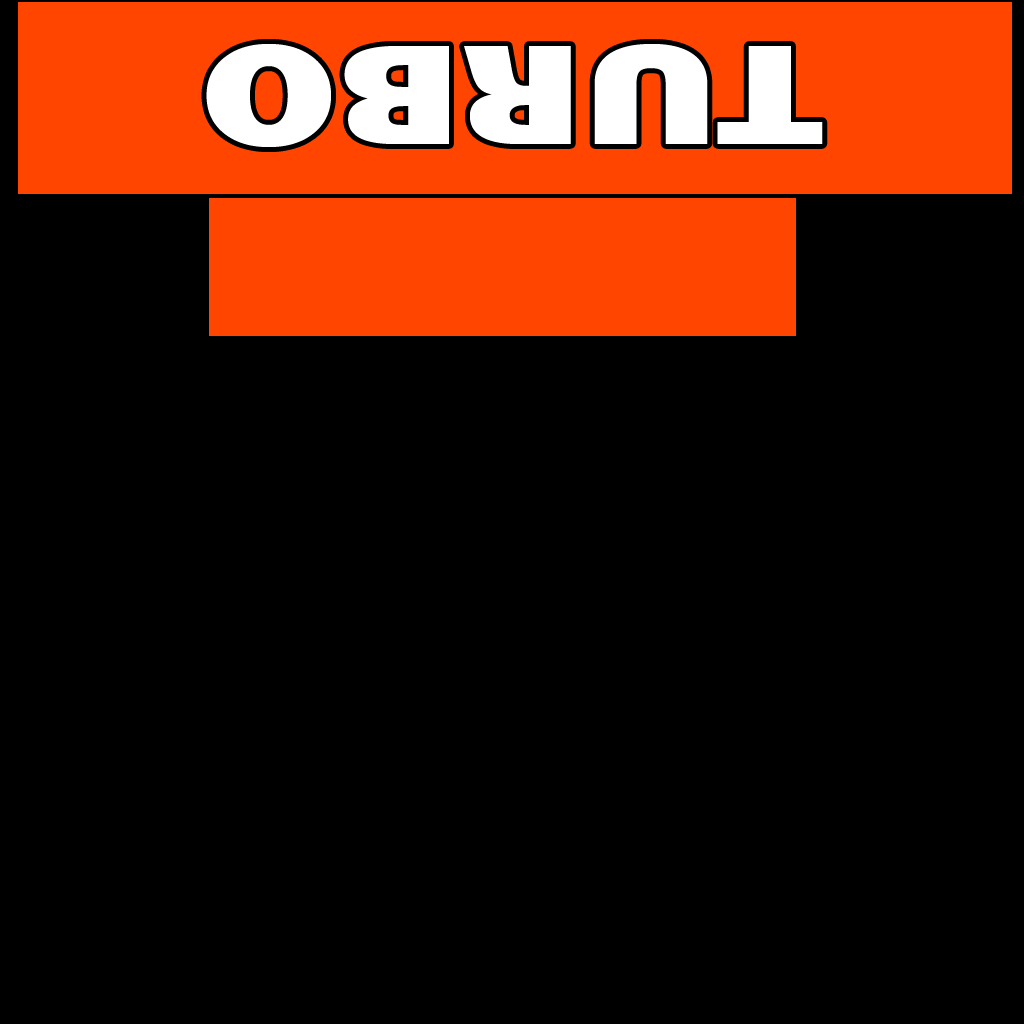
<style>
.page{position:relative;width:1024px;height:1024px;background:#000000}
.page>*{position:absolute;margin:0}
.t1{font:143.5px "Humanist521BT-XtraBoldCondensed";color:#ffffff;font-variant:small-caps;scale:1.47 1}
</style>
<div class="page">
<p class="t1" style="left:206px;top:44px;width:617px;height:103px;rotate:180deg">TURBO</p>
</div>
